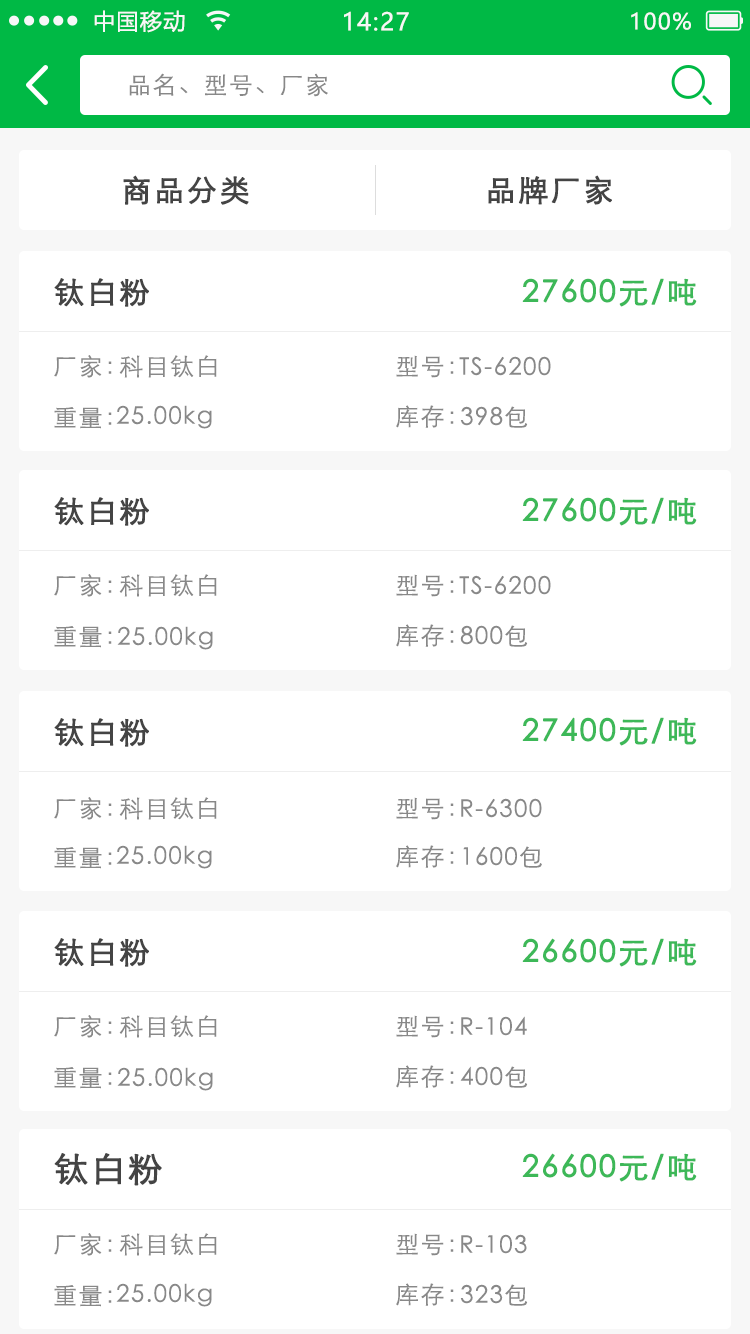
<style>
.page{position:relative;width:750px;height:1334px;background:#ffffff}
.page>*{position:absolute;margin:0}
.t1{font:22px "MicrosoftYaHei";letter-spacing:0.06em;color:#f7f7f7}
.t2{font:24px "MicrosoftYaHei";letter-spacing:0.06em;color:#f7f7f7}
.t3{font:24px "STXihei";letter-spacing:0.06em;color:#888888}
.t4{font:30px "STXihei";letter-spacing:0.06em;color:#444444;font-weight:bold}
.t5{font:30px "STXihei";letter-spacing:0.06em;color:#3db858;font-weight:bold}
.t6{font:34px "STXihei";letter-spacing:0.06em;color:#444444;font-weight:bold}
</style>
<div class="page">
<p class="t1" style="left:94px;top:10px;width:91px;height:23px">中国移动</p>
<p class="t2" style="left:344px;top:11px;width:65px;height:20px">14:27</p>
<p class="t1" style="left:631px;top:12px;width:60px;height:18px">100%</p>
<p class="t3" style="left:129px;top:73px;width:199px;height:24px">品名、型号、厂家</p>
<p class="t4" style="left:123px;top:175px;width:126px;height:30px">商品分类</p>
<p class="t4" style="left:488px;top:175px;width:124px;height:30px">品牌厂家</p>
<p class="t4" style="left:54px;top:278px;width:95px;height:29px">钛白粉</p>
<p class="t5" style="left:522px;top:278px;width:175px;height:29px">27600元/吨</p>
<p class="t3" style="left:54px;top:355px;width:58px;height:23px">厂家：</p>
<p class="t3" style="left:119px;top:355px;width:98px;height:23px">科目钛白</p>
<p class="t3" style="left:396px;top:355px;width:58px;height:23px">型号：</p>
<p class="t3" style="left:459px;top:356px;width:92px;height:20px">TS-6200</p>
<p class="t3" style="left:54px;top:407px;width:58px;height:22px">重量：</p>
<p class="t3" style="left:116px;top:405px;width:96px;height:24px">25.00kg</p>
<p class="t3" style="left:396px;top:405px;width:58px;height:23px">库存：</p>
<p class="t3" style="left:460px;top:406px;width:68px;height:22px">398包</p>
<p class="t4" style="left:54px;top:497px;width:95px;height:29px">钛白粉</p>
<p class="t5" style="left:522px;top:497px;width:175px;height:29px">27600元/吨</p>
<p class="t3" style="left:54px;top:574px;width:58px;height:23px">厂家：</p>
<p class="t3" style="left:119px;top:574px;width:98px;height:23px">科目钛白</p>
<p class="t3" style="left:396px;top:574px;width:58px;height:23px">型号：</p>
<p class="t3" style="left:459px;top:575px;width:92px;height:20px">TS-6200</p>
<p class="t3" style="left:54px;top:626px;width:58px;height:22px">重量：</p>
<p class="t3" style="left:117px;top:626px;width:96px;height:24px">25.00kg</p>
<p class="t3" style="left:396px;top:624px;width:58px;height:23px">库存：</p>
<p class="t3" style="left:460px;top:625px;width:68px;height:22px">800包</p>
<p class="t4" style="left:54px;top:718px;width:95px;height:29px">钛白粉</p>
<p class="t5" style="left:522px;top:717px;width:175px;height:29px">27400元/吨</p>
<p class="t3" style="left:54px;top:797px;width:58px;height:23px">厂家：</p>
<p class="t3" style="left:119px;top:797px;width:98px;height:23px">科目钛白</p>
<p class="t3" style="left:396px;top:797px;width:58px;height:23px">型号：</p>
<p class="t3" style="left:461px;top:798px;width:81px;height:20px">R-6300</p>
<p class="t3" style="left:116px;top:845px;width:96px;height:24px">25.00kg</p>
<p class="t3" style="left:396px;top:845px;width:58px;height:23px">库存：</p>
<p class="t3" style="left:463px;top:846px;width:79px;height:22px">1600包</p>
<p class="t3" style="left:54px;top:847px;width:58px;height:22px">重量：</p>
<p class="t4" style="left:54px;top:938px;width:95px;height:29px">钛白粉</p>
<p class="t5" style="left:522px;top:938px;width:175px;height:29px">26600元/吨</p>
<p class="t3" style="left:54px;top:1015px;width:58px;height:23px">厂家：</p>
<p class="t3" style="left:119px;top:1015px;width:98px;height:23px">科目钛白</p>
<p class="t3" style="left:396px;top:1015px;width:58px;height:23px">型号：</p>
<p class="t3" style="left:461px;top:1016px;width:66px;height:20px">R-104</p>
<p class="t3" style="left:54px;top:1067px;width:58px;height:22px">重量：</p>
<p class="t3" style="left:117px;top:1067px;width:96px;height:24px">25.00kg</p>
<p class="t3" style="left:396px;top:1065px;width:58px;height:23px">库存：</p>
<p class="t3" style="left:460px;top:1066px;width:68px;height:22px">400包</p>
<p class="t6" style="left:54px;top:1153px;width:108px;height:33px">钛白粉</p>
<p class="t5" style="left:522px;top:1153px;width:175px;height:29px">26600元/吨</p>
<p class="t3" style="left:54px;top:1233px;width:58px;height:23px">厂家：</p>
<p class="t3" style="left:119px;top:1233px;width:98px;height:23px">科目钛白</p>
<p class="t3" style="left:396px;top:1233px;width:58px;height:23px">型号：</p>
<p class="t3" style="left:461px;top:1234px;width:66px;height:20px">R-103</p>
<p class="t3" style="left:54px;top:1285px;width:58px;height:22px">重量：</p>
<p class="t3" style="left:116px;top:1283px;width:96px;height:24px">25.00kg</p>
<p class="t3" style="left:396px;top:1283px;width:58px;height:23px">库存：</p>
<p class="t3" style="left:460px;top:1284px;width:68px;height:22px">323包</p>
</div>
